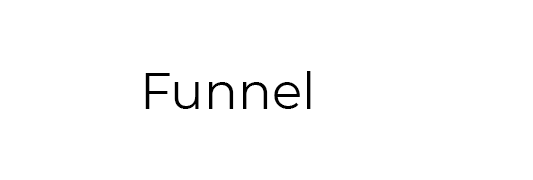
<style>
.page{position:relative;width:533px;height:180px;background:#ffffff}
.page>*{position:absolute;margin:0}
.t1{font:50px "Montserrat-Regular";color:#000000}
</style>
<div class="page">
<p class="t1" style="left:145px;top:71px;width:166px;height:38px">Funnel</p>
</div>
